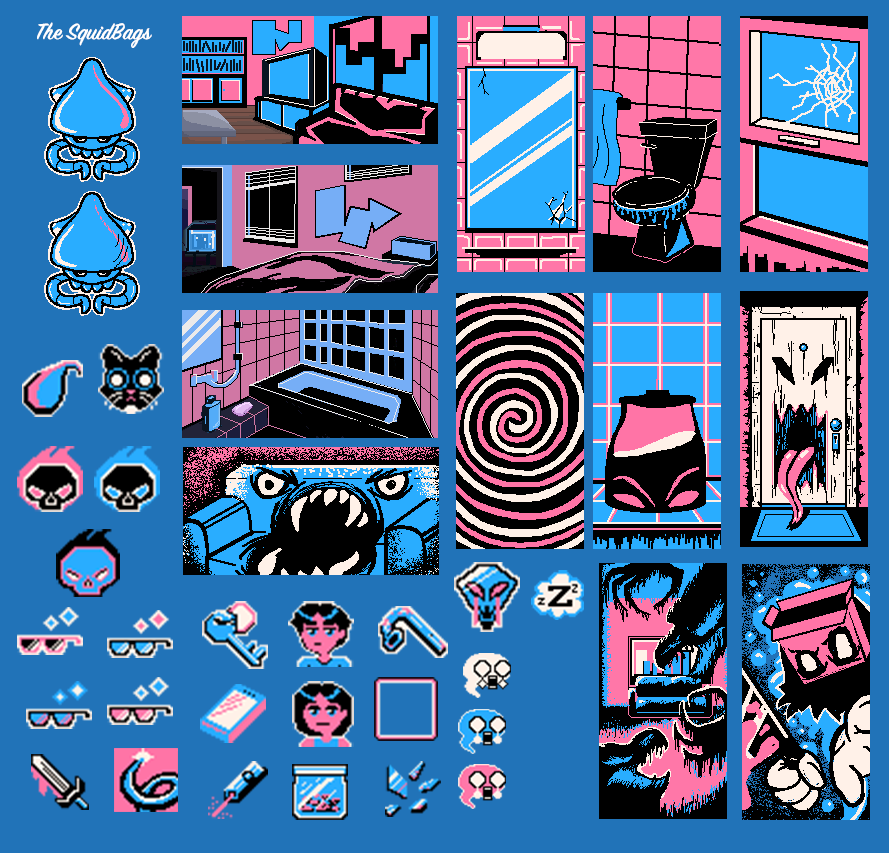
<style>
.page{position:relative;width:889px;height:853px;background:#2173b8}
.page>*{position:absolute;margin:0}
.t1{font:25.1px "SignPainter-HouseScriptSemibold";color:#ffffff}
</style>
<div class="page">
<p class="t1" style="left:37px;top:22px;width:115px;height:26px">The SquidBags</p>
</div>
